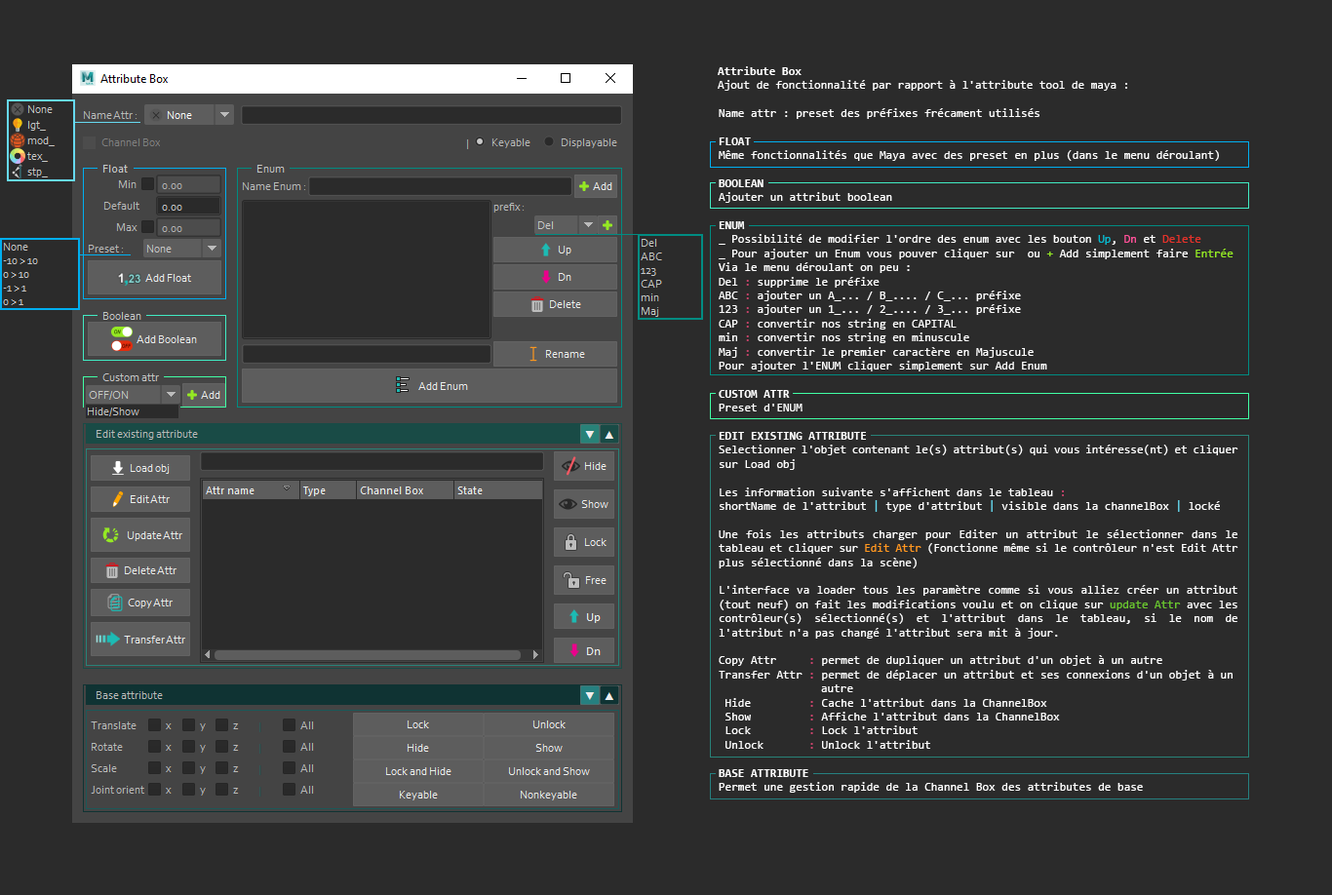
<style>
.page{position:relative;width:1332px;height:895px;background:#2b2b2b}
.page>*{position:absolute;margin:0}
.t1{font:11.7px "Consolas";color:#ffffff}
.t2{font:11.7px "Consolas-Bold";color:#ffffff}
.t3{font:11.7px "Consolas";color:#00bacf}
.t4{font:11.7px "Consolas";color:#fd5199}
.t5{font:11.7px "Consolas";color:#e3322a}
.t6{font:11.7px "Consolas";color:#95e923}
.t7{font:11.7px "Consolas";color:#cc446d}
.t8{font:11.7px "Consolas";color:#66d9ef}
.t9{font:11.7px "Consolas";color:#fd971f}
.t10{font:11.7px "Consolas";color:#6ac62e}
</style>
<div class="page">
<p class="t1" style="left:718px;top:66px;width:409px;height:25px;text-align:justify"><span class="t2">Attribute Box<br></span>Ajout de fonctionnalité par rapport à l'attribute tool de maya :</p>
<p class="t1" style="left:719px;top:108px;width:519px;height:685px;text-align:justify">Name attr : preset des préfixes frécament utilisés<br><br><span class="t2">FLOAT<br></span>Même fonctionnalités que Maya avec des preset en plus (dans le menu déroulant)<br><br><span class="t2">BOOLEAN<br></span>Ajouter un attribut boolean<br><br><span class="t2">ENUM </span><br>_ Possibilité de modifier l'ordre des enum avec les bouton <span class="t3">Up</span>, <span class="t4">Dn</span> et <span class="t5">Delete<br></span>_ Pour ajouter un Enum vous pouver cliquer sur  ou <span class="t6">+</span> Add simplement faire <span class="t6">Entrée<br></span>Via le menu déroulant on peu :<br>Del <span class="t7">:</span> supprime le préfixe<br>ABC <span class="t7">:</span> ajouter un A_... / B_.... / C_... préfixe <br>123 <span class="t7">:</span> ajouter un 1_... / 2_.... / 3_... préfixe <br>CAP <span class="t7">:</span> convertir nos string en CAPITAL<br>min <span class="t7">:</span> convertir nos string en minuscule<br>Maj <span class="t7">: </span>convertir le premier caractère en Majuscule<br>Pour ajouter l'ENUM cliquer simplement sur Add Enum<br><br><span class="t2">CUSTOM ATTR <br></span>Preset d'ENUM<br><span class="t2"><br>EDIT EXISTING ATTRIBUTE</span>  <br>Selectionner l'objet contenant le(s) attribut(s) qui vous intéresse(nt) et cliquer sur Load obj<br><br>Les information suivante s'affichent dans le tableau <span class="t7">:<br></span>shortName de l'attribut <span class="t8">|</span> type d'attribut <span class="t8">|</span> visible dans la channelBox <span class="t8">|</span> locké<br><br>Une fois les attributs charger pour Editer un attribut le sélectionner dans le tableau et cliquer sur <span class="t9">Edit Attr</span> (Fonctionne même si le contrôleur n'est Edit Attr plus sélectionné dans la scène)<br><br>L'interface va loader tous les paramètre comme si vous alliez créer un attribut (tout neuf) on fait les modifications voulu et on clique sur <span class="t10">update Attr</span> avec les contrôleur(s) sélectionné(s) et l'attribut dans le tableau, si le nom de l'attribut n'a pas changé l'attribut sera mit à jour.<br><br>Copy Attr     <span class="t7">: </span>permet de dupliquer un attribut d'un objet à un autre<br>Transfer Attr <span class="t7">:</span> permet de déplacer un attribut et ses connexions d'un objet à un <br>       autre<br> Hide         <span class="t7">:</span> Cache l'attribut dans la ChannelBox<br> Show         <span class="t7">:</span> Affiche l'attribut dans la ChannelBox<br> Lock         <span class="t7">:</span> Lock l'attribut<br> Unlock       <span class="t7">:</span> Unlock l'attribut<br><br><span class="t2">BASE ATTRIBUTE<br></span>Permet une gestion rapide de la Channel Box des attributes de base</p>
</div>
